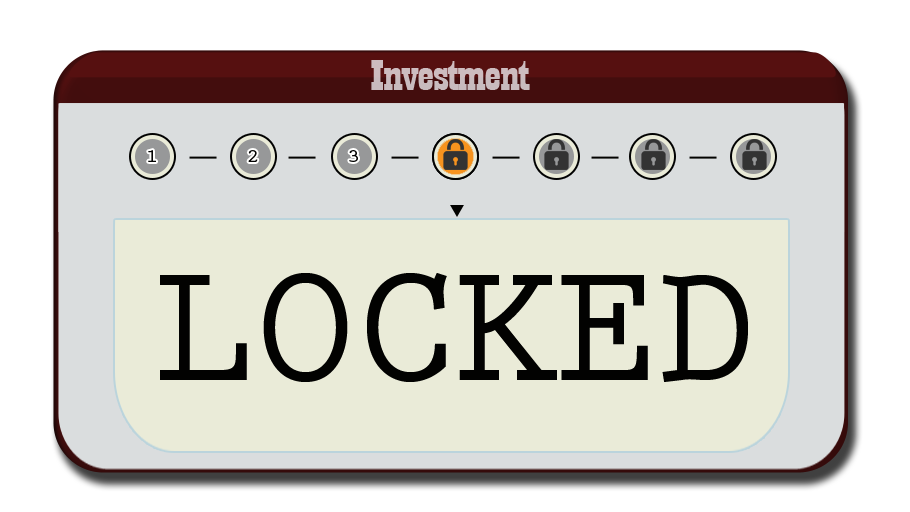
<style>
.page{position:relative;width:910px;height:512px;background:#eaebd8}
.page>*{position:absolute;margin:0}
.t1{font:44.6px "Playbill";letter-spacing:-0.025em;color:#c8bbbe;scale:1.61 1}
.t2{font:18.8px "PrestigeEliteStd-Bd";letter-spacing:-0.025em;color:#020201;scale:1.18 1}
.t3{font:175px "PrestigeEliteStd-Bd";letter-spacing:-0.025em;color:#020201}
</style>
<div class="page">
<p class="t1" style="left:371px;top:60px;width:159px;height:30px">Investment</p>
<p class="t2" style="left:148px;top:150px;width:8px;height:12px">1</p>
<p class="t2" style="left:248px;top:150px;width:10px;height:12px">2</p>
<p class="t2" style="left:349px;top:150px;width:9px;height:12px">3</p>
<p class="t3" style="left:160px;top:273px;width:588px;height:109px">LOCKED</p>
</div>
